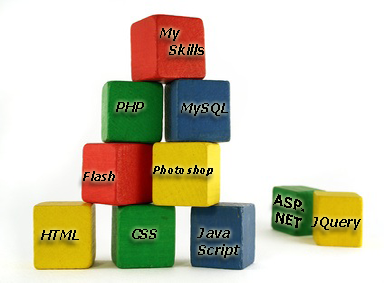
<style>
.page{position:relative;width:384px;height:283px;background:#ffffff}
.page>*{position:absolute;margin:0}
.t1{font:14px "Verdana-BoldItalic";color:#000000;scale:0.91 1}
.t2{font:12px "Verdana-BoldItalic";color:#000000;scale:0.91 1}
.t3{font:11px "Verdana-BoldItalic";color:#000000;scale:0.91 1}
.t4{font:14.8px "Verdana-BoldItalic";color:#000000;scale:0.85 1}
</style>
<div class="page">
<p class="t1" style="left:160px;top:28px;width:44px;height:27px">My<br>   Skills</p>
<p class="t1" style="left:116px;top:102px;width:28px;height:10px">PHP</p>
<p class="t1" style="left:181px;top:103px;width:47px;height:13px">MySQL</p>
<p class="t2" style="left:83px;top:171px;width:32px;height:10px">Flash</p>
<p class="t3" style="left:153px;top:165px;width:60px;height:11px">Photoshop</p>
<p class="t4" style="left:273px;top:194px;width:31px;height:34px;rotate:15deg">ASP.<br>NET</p>
<p class="t1" style="left:311px;top:217px;width:50px;height:13px">JQuery</p>
<p class="t1" style="left:41px;top:230px;width:38px;height:10px">HTML</p>
<p class="t1" style="left:132px;top:229px;width:25px;height:10px">CSS</p>
<p class="t1" style="left:197px;top:228px;width:43px;height:30px">Java<br>Script</p>
</div>
